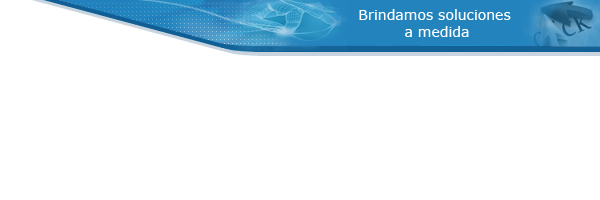
<style>
.page{position:relative;width:600px;height:200px;background:#ffffff}
.page>*{position:absolute;margin:0}
.t1{font:14px "Verdana";color:#ffffff}
</style>
<div class="page">
<p class="t1" style="left:359px;top:9px;width:152px;height:28px;text-align:center">Brindamos soluciones <br>a medida</p>
</div>
